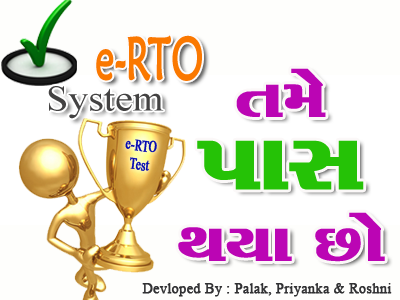
<style>
.page{position:relative;width:400px;height:300px;background:#fefefc}
.page>*{position:absolute;margin:0}
.t1{font:59.1px "MaiandraGD-Regular";color:#fa7800;font-weight:bold;scale:0.63 1}
.t2{font:68.6px/72px "Maruti";color:#bb05b4;font-weight:bold;scale:1.17 1}
.t3{font:100px/72px "Maruti";color:#25c206;font-weight:bold;scale:1.17 1}
.t4{font:36.3px "TimesNewRomanPSMT";color:#434242;scale:1.1 1}
.t5{font:15.8px "TimesNewRomanPSMT";color:#070bb2;font-weight:bold;scale:0.7 1}
.t6{font:14.2px "TimesNewRomanPSMT";color:#313133;font-weight:bold}
</style>
<div class="page">
<p class="t1" style="left:96px;top:35px;width:106px;height:46px">e-RTO</p>
<p class="t2" style="left:178px;top:68px;width:207px;height:194px;text-align:center">ík{u<br><span class="t3">ÃkkMk <br></span>ÚkÞk Aku</p>
<p class="t4" style="left:48px;top:86px;width:116px;height:33px">System</p>
<p class="t5" style="left:125px;top:139px;width:32px;height:32px;text-align:center;rotate:7deg">e-RTO<br>Test</p>
<p class="t6" style="left:142px;top:283px;width:250px;height:14px">Devloped By : Palak, Priyanka &amp; Roshni</p>
</div>
